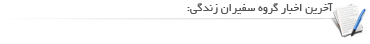
<style>
.page{position:relative;width:370px;height:44px;background:#ffffff}
.page>*{position:absolute;margin:0}
.t1{font:12px "BYekan";color:#525252}
</style>
<div class="page">
<p class="t1" style="left:187px;top:3px;width:146px;height:11px">آخرین اخبار گروه سفیران زندگی:</p>
</div>
